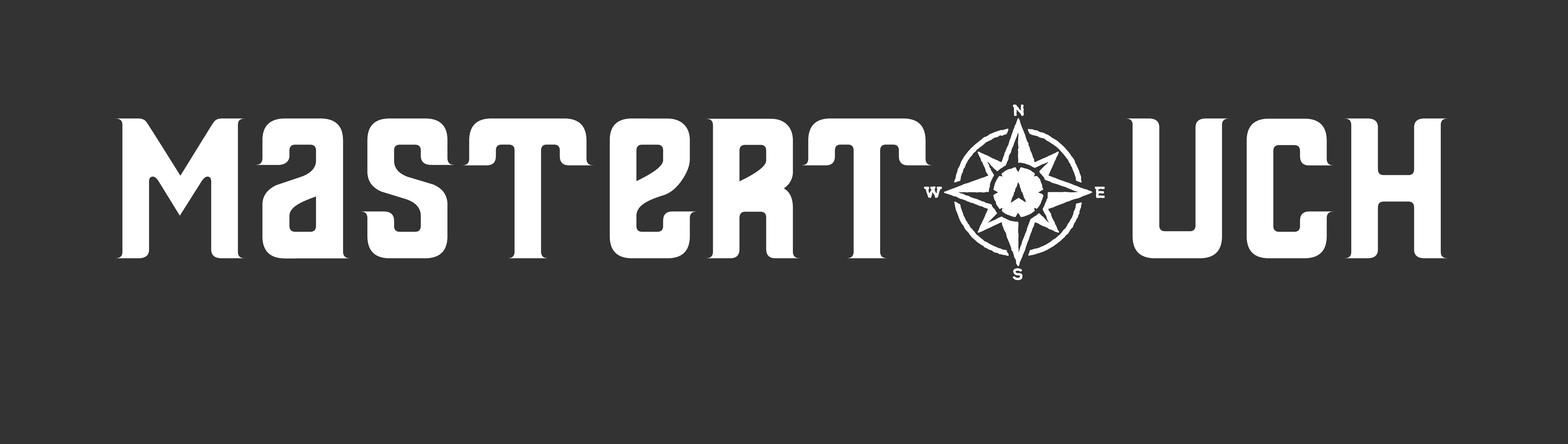
<style>
.page{position:relative;width:1568px;height:444px;background:#333333}
.page>*{position:absolute;margin:0}
.t1{font:186px "Thailandesa";color:#ffffff}
</style>
<div class="page">
<p class="t1" style="left:115px;top:119px;width:1333px;height:140px">MASTERT    UCH</p>
</div>
